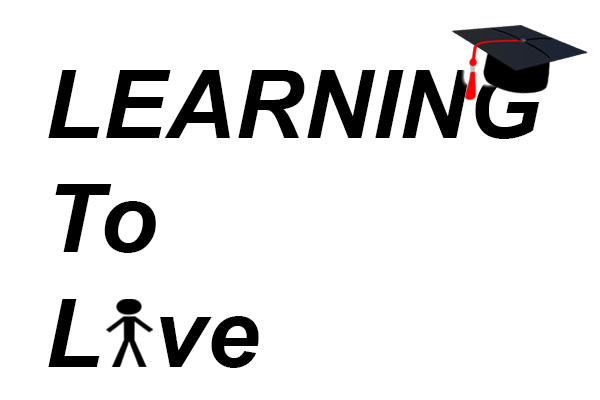
<style>
.page{position:relative;width:600px;height:400px;background:#ffffff}
.page>*{position:absolute;margin:0}
.t1{font:95.2px "Arial-BoldItalicMT";color:#000000}
</style>
<div class="page">
<p class="t1" style="left:48px;top:69px;width:494px;height:299px">LEARNING<br>To<br>L  ve</p>
</div>
